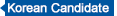
<style>
.page{position:relative;width:117px;height:16px;background:#0056a0}
.page>*{position:absolute;margin:0}
.t1{font:12px "ArialMT";color:#ffffff;font-weight:bold}
</style>
<div class="page">
<p class="t1" style="left:8px;top:3px;width:101px;height:10px">Korean Candidate</p>
</div>
